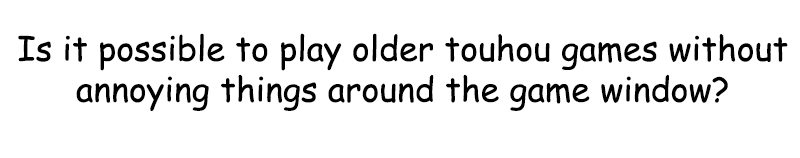
<style>
.page{position:relative;width:800px;height:158px;background:#ffffff}
.page>*{position:absolute;margin:0}
.t1{font:34px "ComicSansMS";color:#000000}
</style>
<div class="page">
<p class="t1" style="left:18px;top:33px;width:770px;height:79px;text-align:center">Is it possible to play older touhou games without <br>annoying things around the game window?</p>
</div>
